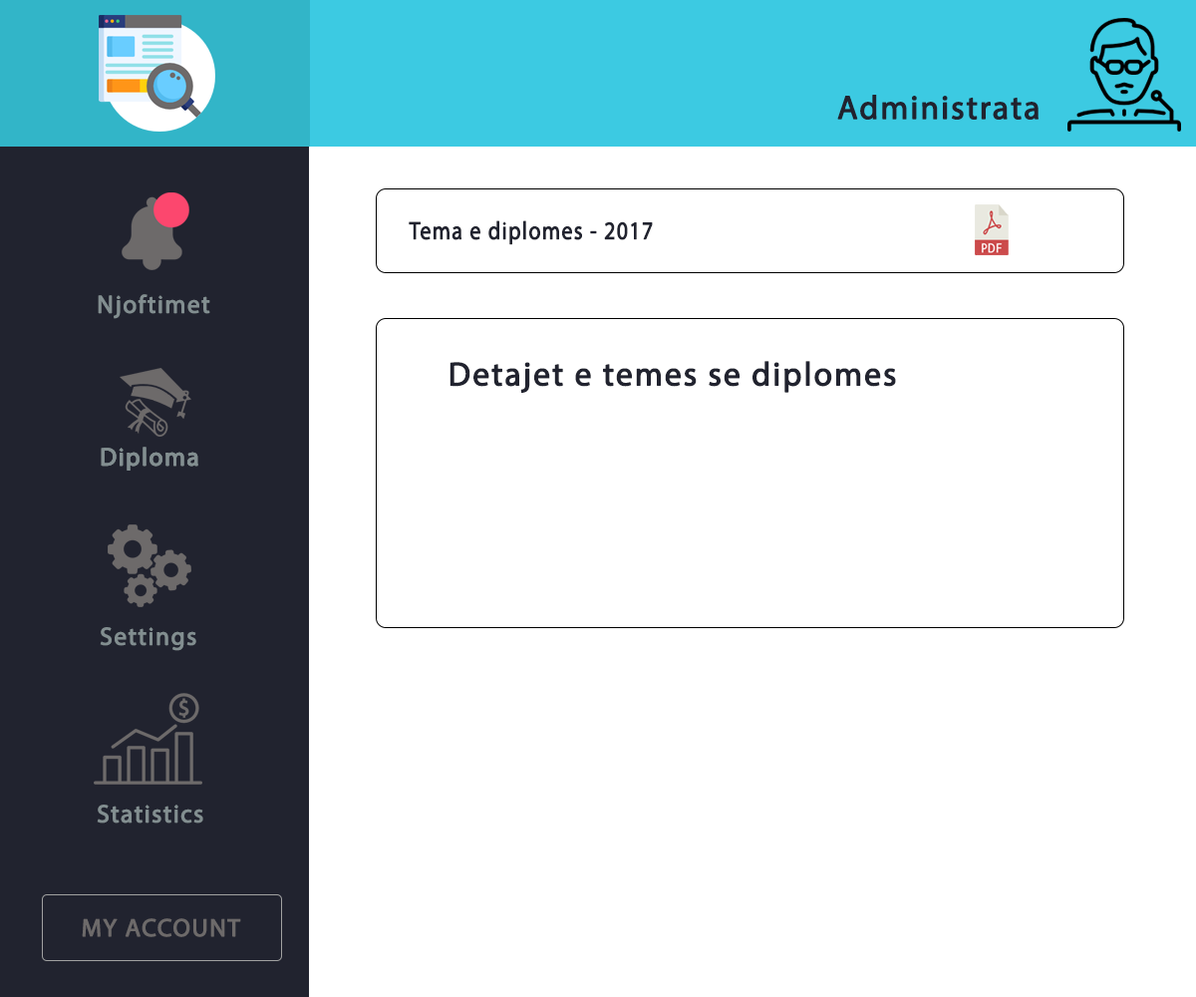
<style>
.page{position:relative;width:1196px;height:997px;background:#ffffff}
.page>*{position:absolute;margin:0}
.t1{font:33.2px "MyriadPro-Regular";letter-spacing:0.04em;color:#21232f;font-weight:bold}
.t2{font:24.9px "MyriadPro-Regular";letter-spacing:0.04em;color:#21232f;font-weight:bold;scale:0.87 1}
.t3{font:24.9px "MyriadPro-Regular";letter-spacing:0.04em;color:#828e90;font-weight:bold}
.t4{font:24.9px "MyriadPro-Regular";letter-spacing:0.04em;color:#6d6a6a;font-weight:bold}
</style>
<div class="page">
<p class="t1" style="left:837px;top:95px;width:202px;height:25px">Administrata</p>
<p class="t2" style="left:409px;top:220px;width:244px;height:25px">Tema e diplomes - 2017</p>
<p class="t3" style="left:98px;top:294px;width:112px;height:25px">Njoftimet</p>
<p class="t1" style="left:450px;top:361px;width:446px;height:32px">Detajet e temes se diplomes</p>
<p class="t3" style="left:101px;top:447px;width:97px;height:24px">Diploma</p>
<p class="t3" style="left:101px;top:447px;width:97px;height:24px">Diploma</p>
<p class="t3" style="left:100px;top:627px;width:96px;height:24px">Settings</p>
<p class="t3" style="left:97px;top:804px;width:106px;height:19px">Statistics</p>
<p class="t4" style="left:82px;top:918px;width:159px;height:19px">MY ACCOUNT</p>
</div>
